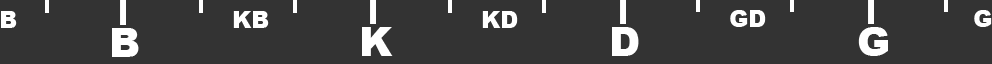
<style>
.page{position:relative;width:992px;height:64px;background:#333333}
.page>*{position:absolute;margin:0}
.t1{font:23px "Arial-Black";color:#ffffff}
.t2{font:40px "Arial-Black";color:#ffffff}
</style>
<div class="page">
<p class="t1" style="left:1px;top:11px;width:16px;height:17px">B</p>
<p class="t1" style="left:233px;top:11px;width:36px;height:17px">KB</p>
<p class="t1" style="left:482px;top:11px;width:36px;height:17px">KD</p>
<p class="t1" style="left:730px;top:10px;width:36px;height:17px">GD</p>
<p class="t2" style="left:112px;top:28px;width:27px;height:29px">B</p>
<p class="t2" style="left:362px;top:27px;width:31px;height:29px">K</p>
<p class="t2" style="left:612px;top:27px;width:27px;height:29px">D</p>
<p class="t2" style="left:858px;top:27px;width:30px;height:29px">G</p>
</div>
